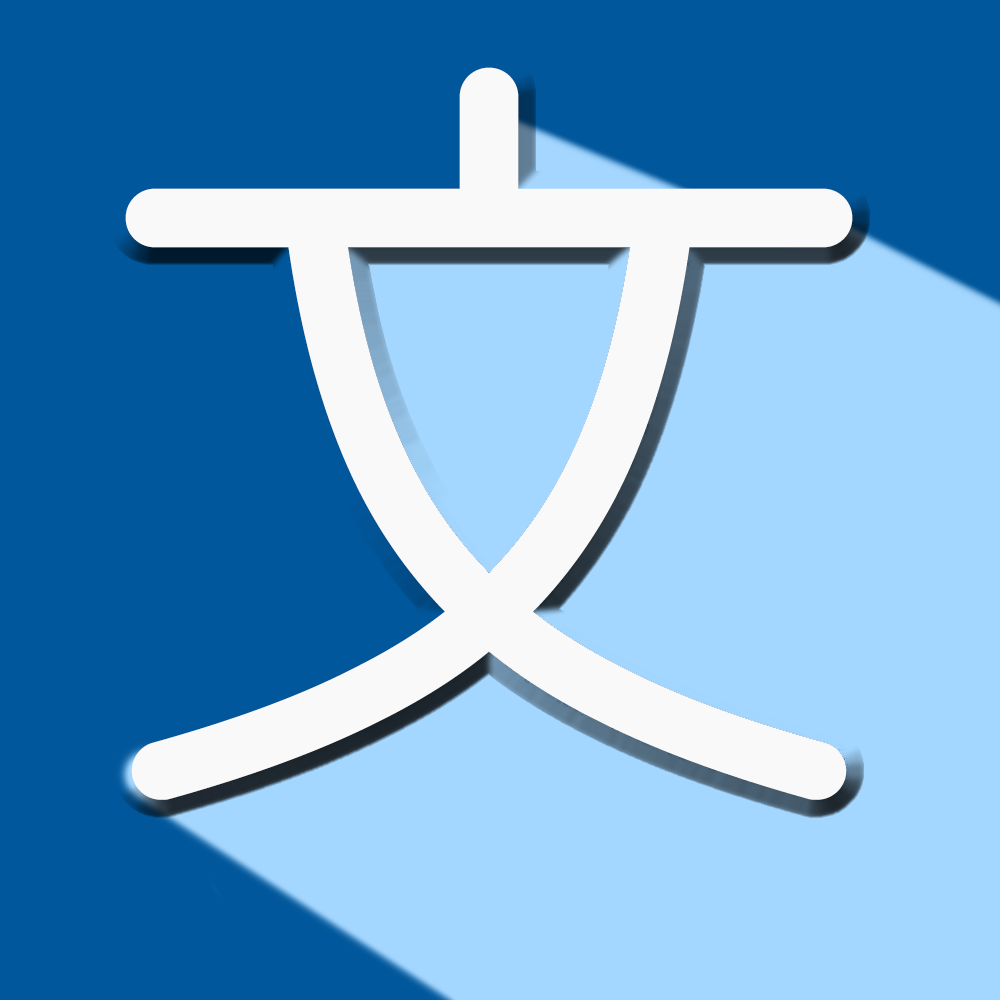
<style>
.page{position:relative;width:1000px;height:1000px;background:#01579b}
.page>*{position:absolute;margin:0}
.t1{font:785.9px "JISZ8903-Medium";color:#f9f9f9;font-weight:bold}
</style>
<div class="page">
<p class="t1" style="left:125px;top:67px;width:728px;height:733px">文</p>
</div>
